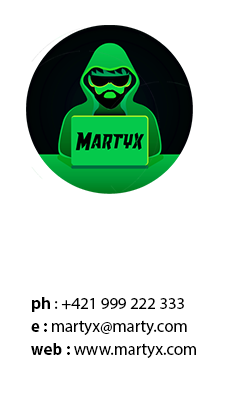
<style>
.page{position:relative;width:228px;height:407px;background:#ffffff}
.page>*{position:absolute;margin:0}
.t1{font:16.8px "MyriadPro-Regular";color:#000000}
.t2{font:16.8px "MyriadPro-Bold";color:#000000}
</style>
<div class="page">
<p class="t1" style="left:32px;top:297px;width:152px;height:15px"><span class="t2">ph</span> : +421 999 222 333</p>
<p class="t1" style="left:31px;top:320px;width:156px;height:15px"><span class="t2">e : </span>martyx@marty.com</p>
<p class="t1" style="left:31px;top:343px;width:165px;height:15px"><span class="t2">web : </span>www.martyx.com</p>
</div>
